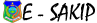
<style>
.page{position:relative;width:97px;height:23px;background:#ffffff}
.page>*{position:absolute;margin:0}
.t1{font:24px "Mistral";color:#000000}
</style>
<div class="page">
<p class="t1" style="left:22px;top:2px;width:73px;height:20px">E - SAKIP</p>
</div>
